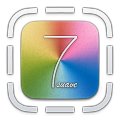
<style>
.page{position:relative;width:120px;height:120px;background:#ffffff}
.page>*{position:absolute;margin:0}
.t1{font:75.8px "HelveticaNeue-UltraLight";color:#f7edee}
.t2{font:12px "BrushScriptMT";color:#edf2f3}
</style>
<div class="page">
<p class="t1" style="left:44px;top:36px;width:33px;height:52px">7</p>
<p class="t2" style="left:56px;top:82px;width:21px;height:6px">suave</p>
</div>
